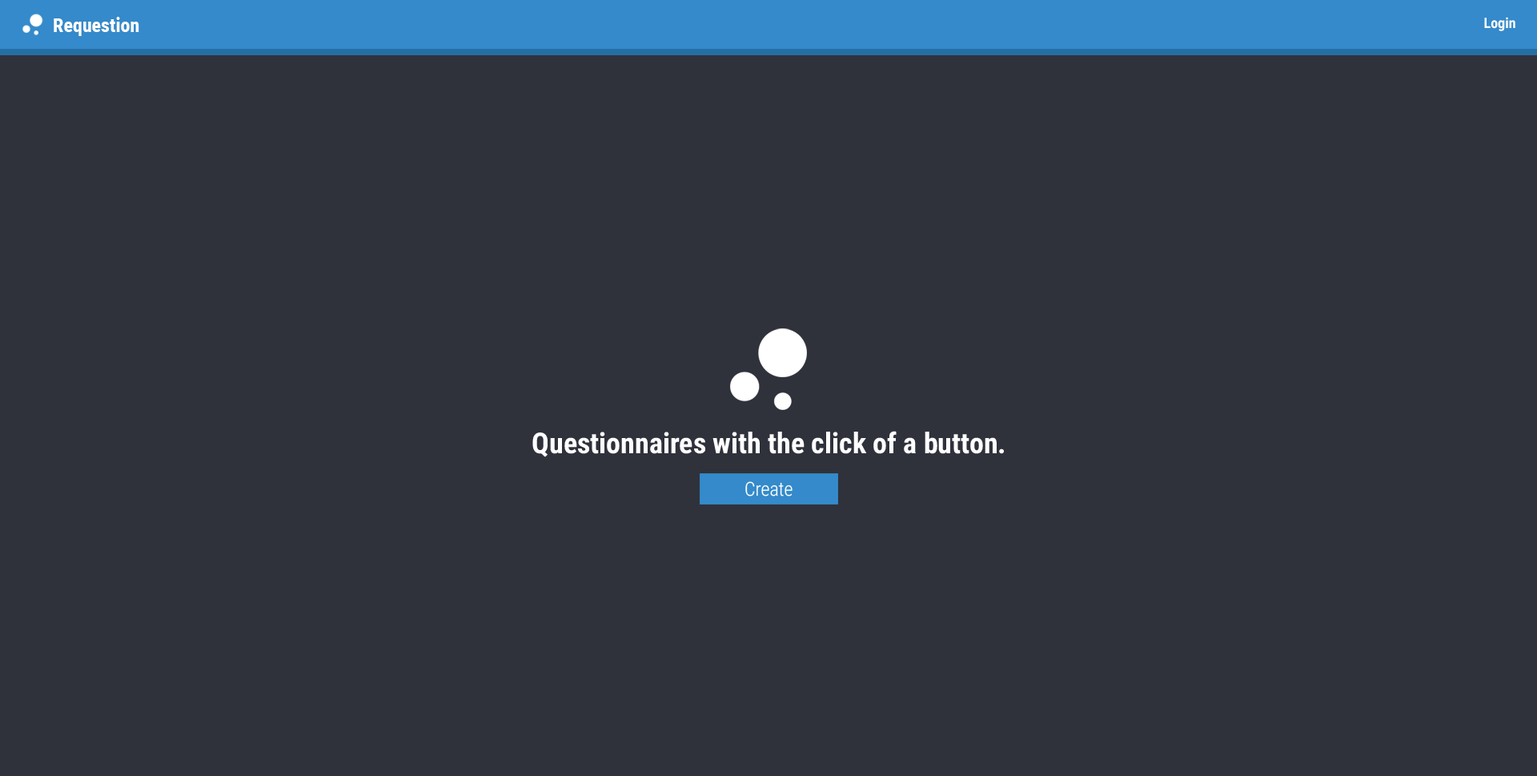
<style>
.page{position:relative;width:1537px;height:776px;background:#2f323b}
.page>*{position:absolute;margin:0}
.t1{font:19.2px "RobotoCondensed-Bold";color:#ffffff}
.t2{font:14.4px "RobotoCondensed-Bold";color:#ffffff}
.t3{font:28.8px "RobotoCondensed-Bold";color:#ffffff}
.t4{font:19.2px "RobotoCondensed-Light";color:#ffffff}
</style>
<div class="page">
<p class="t1" style="left:54px;top:17px;width:85px;height:19px">Requestion</p>
<p class="t2" style="left:1484px;top:17px;width:31px;height:14px">Login</p>
<p class="t3" style="left:532px;top:431px;width:472px;height:26px">Questionnaires with the click of a button.</p>
<p class="t4" style="left:745px;top:481px;width:48px;height:15px">Create</p>
</div>
